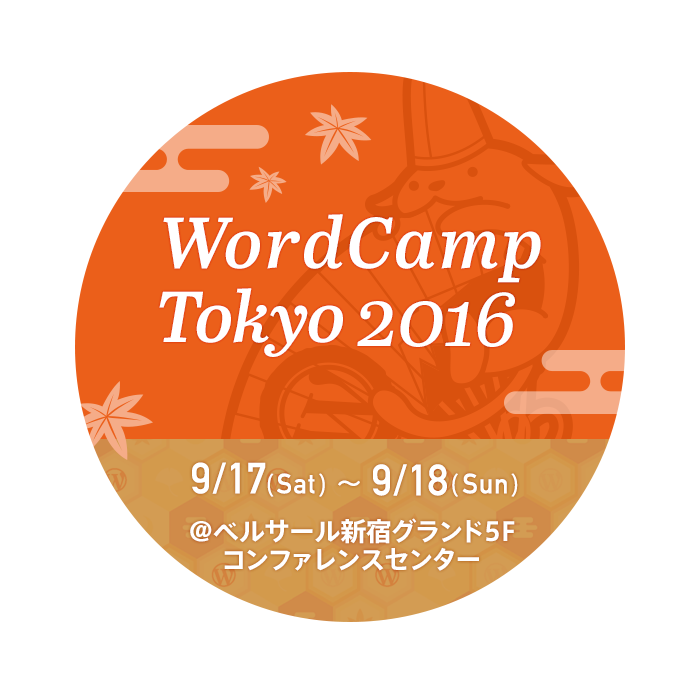
<style>
.page{position:relative;width:700px;height:700px;background:#ffffff}
.page>*{position:absolute;margin:0}
.t1{font:71.7px/74.7px "AbrilText-SemiBoldItalic";letter-spacing:0.05em;color:#ffffff}
.t2{font:71.7px/74.7px "AbrilText-SemiBoldItalic";color:#ffffff}
.t3{font:81.8px "AbrilText-Italic";color:#ffffff}
.t4{font:43.1px "DINAlternate-Bold";letter-spacing:0.025em;color:#ffffff}
.t5{font:23.1px "AxisStd-Regular";letter-spacing:0.025em;color:#ffffff}
.t6{font:27.7px "DINAlternate-Bold";letter-spacing:0.025em;color:#ffffff}
.t7{font:27.1px "AxisStd-Regular";letter-spacing:0.025em;color:#ffffff}
.t8{font:25.8px/28px "AxisStd-Bold";color:#ffffff}
</style>
<div class="page">
<p class="t1" style="left:159px;top:214px;width:382px;height:143px">WordCamp<br><span class="t2">Tokyo</span></p>
<p class="t3" style="left:357px;top:292px;width:158px;height:55px">2016</p>
<p class="t4" style="left:192px;top:462px;width:326px;height:35px">9/17<span class="t5">(</span><span class="t6">Sat</span><span class="t5">)</span><span class="t7">〜</span>9/18<span class="t5">(</span><span class="t6">Sun</span><span class="t5">)</span></p>
<p class="t8" style="left:190px;top:518px;width:325px;height:53px;text-align:center">@ベルサール新宿グランド5F<br>コンファレンスセンター</p>
</div>
